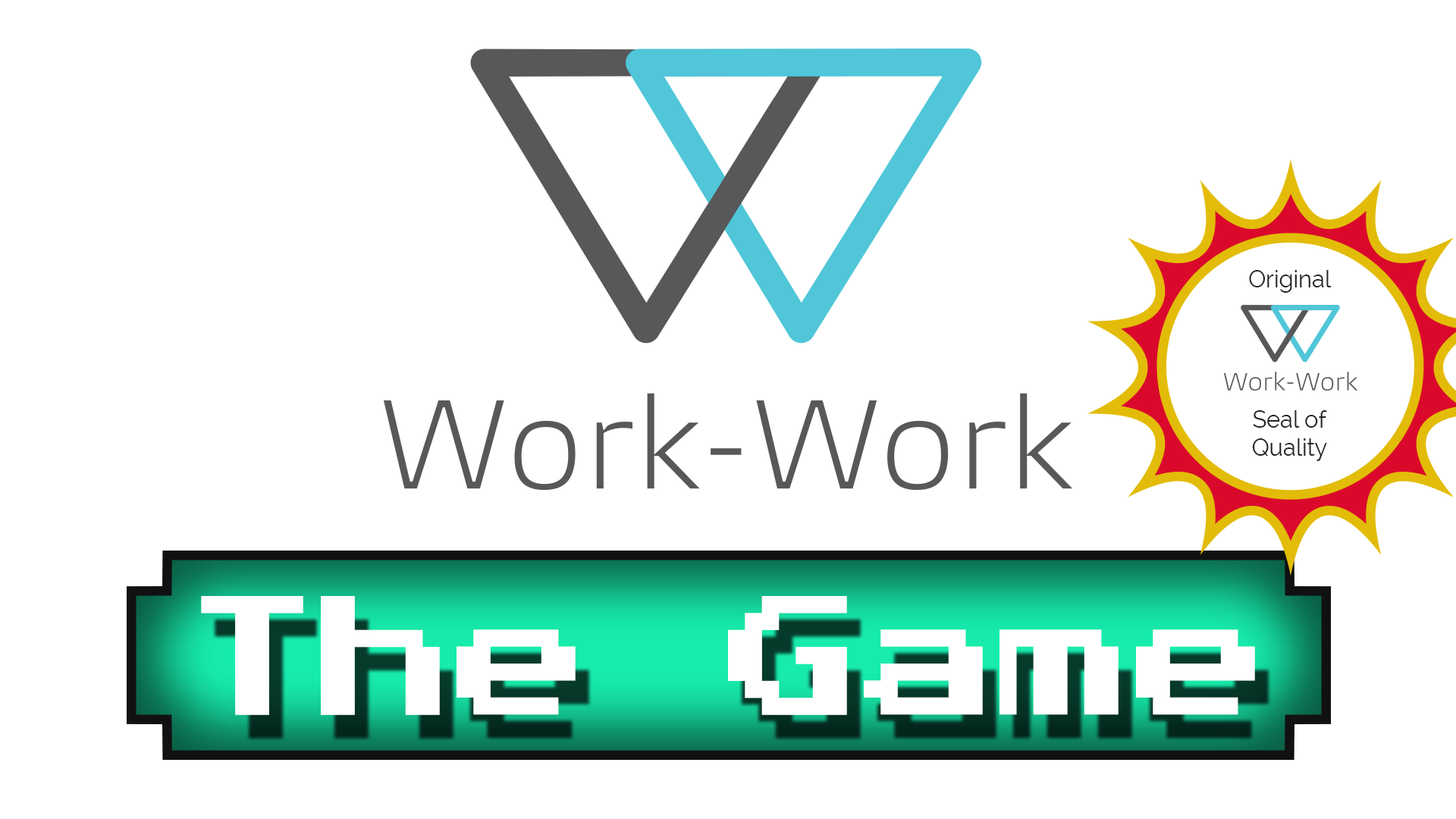
<style>
.page{position:relative;width:1456px;height:819px;background:#ffffff}
.page>*{position:absolute;margin:0}
.t1{font:23.3px "Raleway";color:#252526}
.t2{font:135.9px "PressStart2P";color:#ffffff}
</style>
<div class="page">
<p class="t1" style="left:1249px;top:270px;width:83px;height:191px;text-align:center">Original<br><br><br><br><br>Seal of<br>Quality</p>
<p class="t2" style="left:201px;top:596px;width:1054px;height:119px">The Game</p>
</div>
